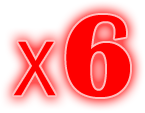
<style>
.page{position:relative;width:145px;height:113px;background:#fe0000}
.page>*{position:absolute;margin:0}
.t1{font:100px "HGGothicM";color:#fe0000}
.t2{font:120px "BritannicBold";color:#fe0000}
</style>
<div class="page">
<p class="t1" style="left:13px;top:15px;width:117px;height:82px">x<span class="t2">6</span></p>
</div>
